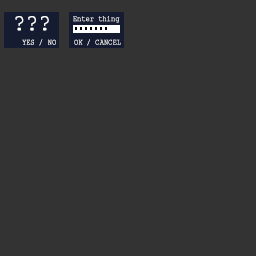
<style>
.page{position:relative;width:256px;height:256px;background:#333333}
.page>*{position:absolute;margin:0}
.t1{font:24px "CourierNewPSMT";color:#ffffff;font-weight:bold;scale:0.85 1}
.t2{font:8px "CourierNewPSMT";font-weight:bold;scale:0.85 1}
</style>
<div class="page">
<p class="t1" style="left:15px;top:16px;width:34px;height:15px">???</p>
<p class="t2" style="left:73px;top:16px;width:47px;height:7px">Enter thing</p>
<p class="t2" style="left:22px;top:39px;width:34px;height:7px">YES / NO</p>
<p class="t2" style="left:74px;top:39px;width:47px;height:7px">OK / CANCEL</p>
</div>
